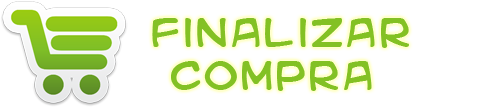
<style>
.page{position:relative;width:500px;height:107px;background:#ffffff}
.page>*{position:absolute;margin:0}
.t1{font:36px "KidKosmic";color:#83c124}
</style>
<div class="page">
<p class="t1" style="left:152px;top:18px;width:257px;height:73px">Finalizar<br> compra</p>
</div>
